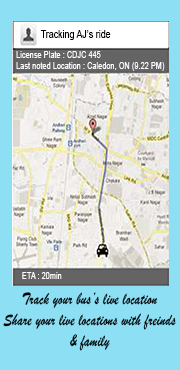
<style>
.page{position:relative;width:180px;height:370px;background:#8ddff4}
.page>*{position:absolute;margin:0}
.t1{font:11.1px "ArialMT";letter-spacing:0.02em;color:#000000;scale:0.77 1}
.t2{font:9.2px "ArialMT";letter-spacing:0.02em;color:#ffffff;scale:0.77 1}
.t3{font:17.5px "BrushScriptMT";letter-spacing:0.02em;color:#000000;scale:0.77 1}
</style>
<div class="page">
<p class="t1" style="left:40px;top:30px;width:71px;height:10px">Tracking AJ’s ride</p>
<p class="t2" style="left:16px;top:51px;width:149px;height:20px">License Plate : CDJC 445<br>Last noted Location : Caledon, ON (9.22 PM) PM)</p>
<p class="t2" style="left:22px;top:272px;width:40px;height:7px">ETA : 20min</p>
<p class="t3" style="left:3px;top:292px;width:173px;height:59px;text-align:center">Track your bus’s live location<br>Share your live locations with freinds <br>&amp; family</p>
</div>
